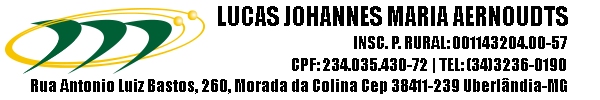
<style>
.page{position:relative;width:600px;height:100px;background:#ffffff}
.page>*{position:absolute;margin:0}
.t1{font:25px "Impact";color:#000000}
.t2{font:16.7px "Impact";color:#000000}
</style>
<div class="page">
<p class="t1" style="left:218px;top:6px;width:350px;height:20px">LUCAS JOHANNES MARIA AERNOUDTS</p>
<p class="t2" style="left:354px;top:36px;width:213px;height:13px">INSC. P. RURAL: 001143204.00-57</p>
<p class="t2" style="left:292px;top:58px;width:274px;height:15px">CPF: 234.035.430-72 | TEL: (34)3236-0190</p>
<p class="t2" style="left:31px;top:78px;width:536px;height:16px">Rua Antonio Luiz Bastos, 260, Morada da Colina Cep 38411-239 Uberlândia-MG</p>
</div>
